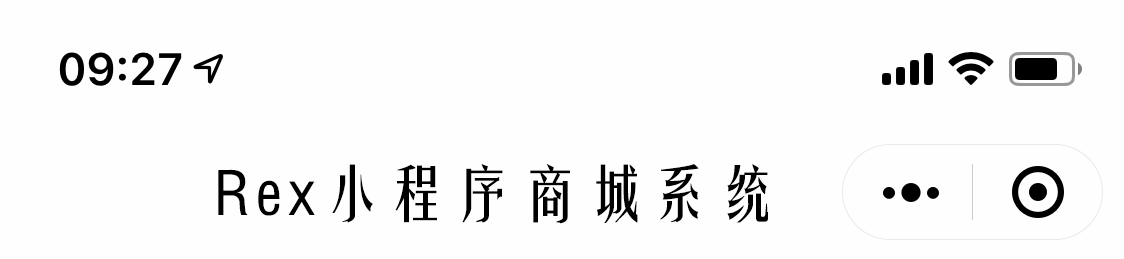
<style>
.page{position:relative;width:1124px;height:259px;background:#fefefe}
.page>*{position:absolute;margin:0}
.t1{font:60px "FZYTK--GBK1-0";letter-spacing:0.1em;color:#000000}
</style>
<div class="page">
<p class="t1" style="left:218px;top:164px;width:550px;height:60px">Rex小程序商城系统</p>
</div>
